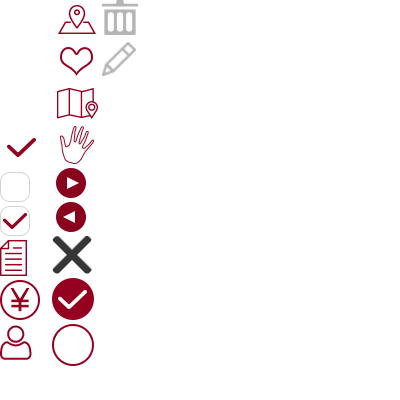
<style>
.page{position:relative;width:400px;height:400px;background:#ffffff}
.page>*{position:absolute;margin:0}
.t1{font:32.5px "ArialMT";color:#950020;scale:1.07 1}
</style>
<div class="page">
<p class="t1" style="left:10px;top:288px;width:20px;height:24px">¥</p>
</div>
